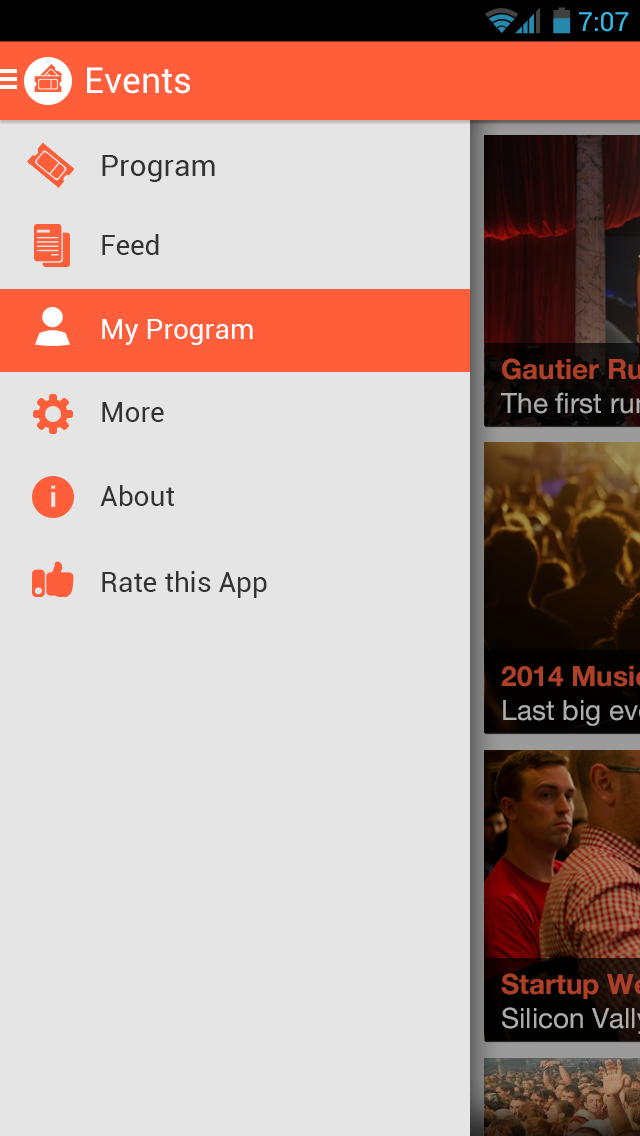
<style>
.page{position:relative;width:640px;height:1136px;background:#e5e5e5}
.page>*{position:absolute;margin:0}
.t1{font:26.6px "Roboto-Regular";color:#33b5e5}
.t2{font:35.8px "Roboto-Regular";color:#ffffff}
.t3{font:30px "Roboto-Regular";color:#333333}
.t4{font:28px "Roboto-Regular";color:#333333}
.t5{font:28px "Roboto-Regular";color:#ffffff}
</style>
<div class="page">
<p class="t1" style="left:579px;top:12px;width:50px;height:20px">7:07</p>
<p class="t2" style="left:87px;top:67px;width:103px;height:27px">Events</p>
<p class="t3" style="left:102px;top:155px;width:113px;height:27px">Program</p>
<p class="t4" style="left:102px;top:234px;width:57px;height:21px">Feed</p>
<p class="t5" style="left:102px;top:319px;width:151px;height:26px">My Program</p>
<p class="t4" style="left:102px;top:402px;width:62px;height:20px">More</p>
<p class="t4" style="left:100px;top:485px;width:75px;height:21px">About</p>
<p class="t4" style="left:102px;top:571px;width:165px;height:27px">Rate this App</p>
</div>
